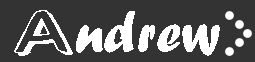
<style>
.page{position:relative;width:255px;height:62px;background:#333333}
.page>*{position:absolute;margin:0}
.t1{font:58.3px "ForteMT";color:#ffffff}
.t2{font:58.3px "Gazzarelli";color:#ffffff}
</style>
<div class="page">
<p class="t1" style="left:14px;top:10px;width:206px;height:46px"><span class="t2">A</span>ndrew</p>
</div>
